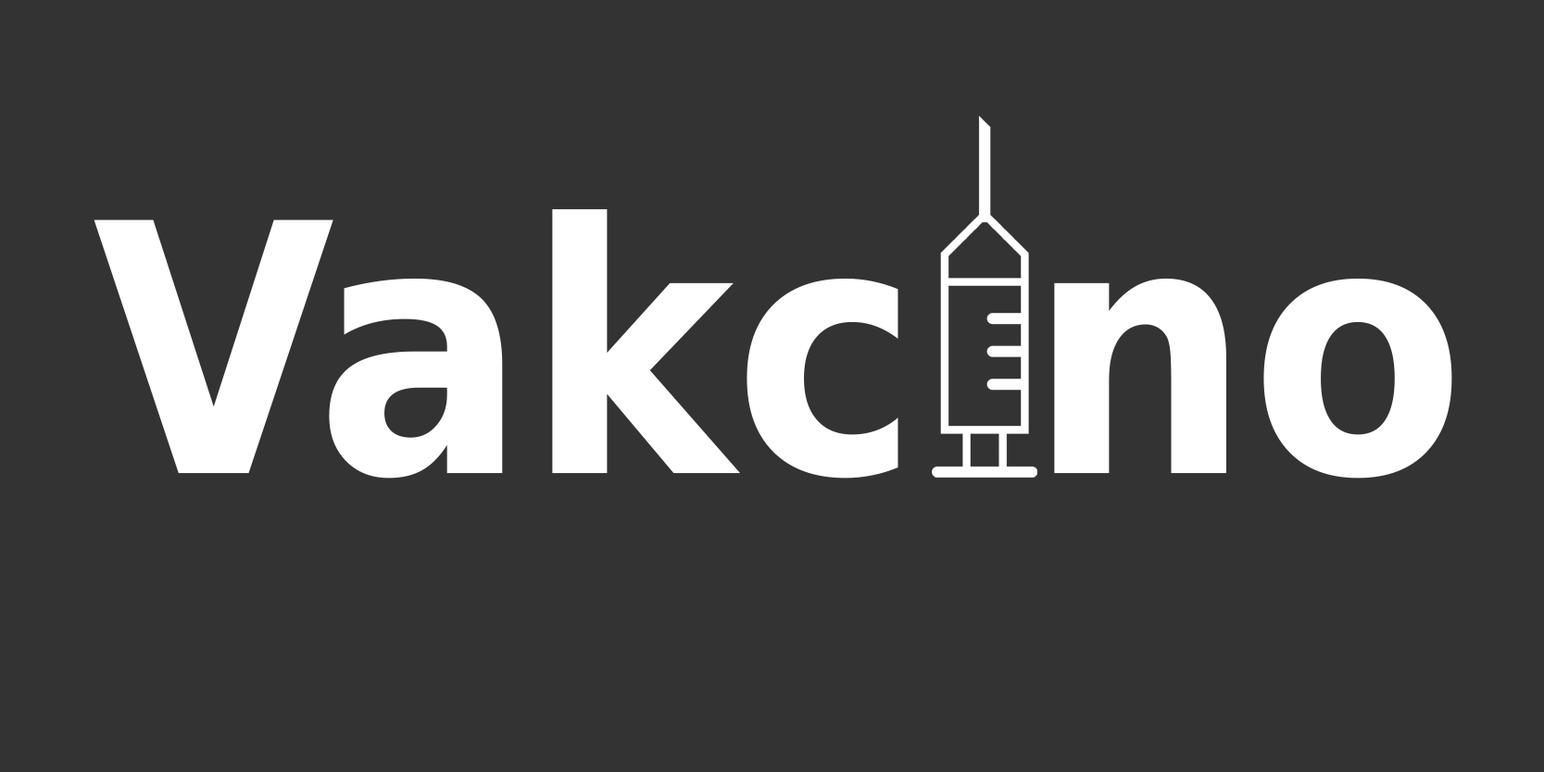
<style>
.page{position:relative;width:1544px;height:772px;background:#333333}
.page>*{position:absolute;margin:0}
.t1{font:347.3px "DejaVuSansCondensed-Bold";color:#ffffff}
</style>
<div class="page">
<p class="t1" style="left:94px;top:209px;width:1358px;height:270px">Vakc no</p>
</div>
